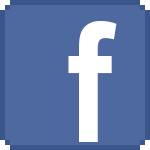
<style>
.page{position:relative;width:150px;height:150px;background:#4d699f}
.page>*{position:absolute;margin:0}
.t1{font:166.1px "ArialNarrow-Bold";letter-spacing:0.01em;color:#ffffff}
</style>
<div class="page">
<p class="t1" style="left:68px;top:21px;width:49px;height:121px">f</p>
</div>
